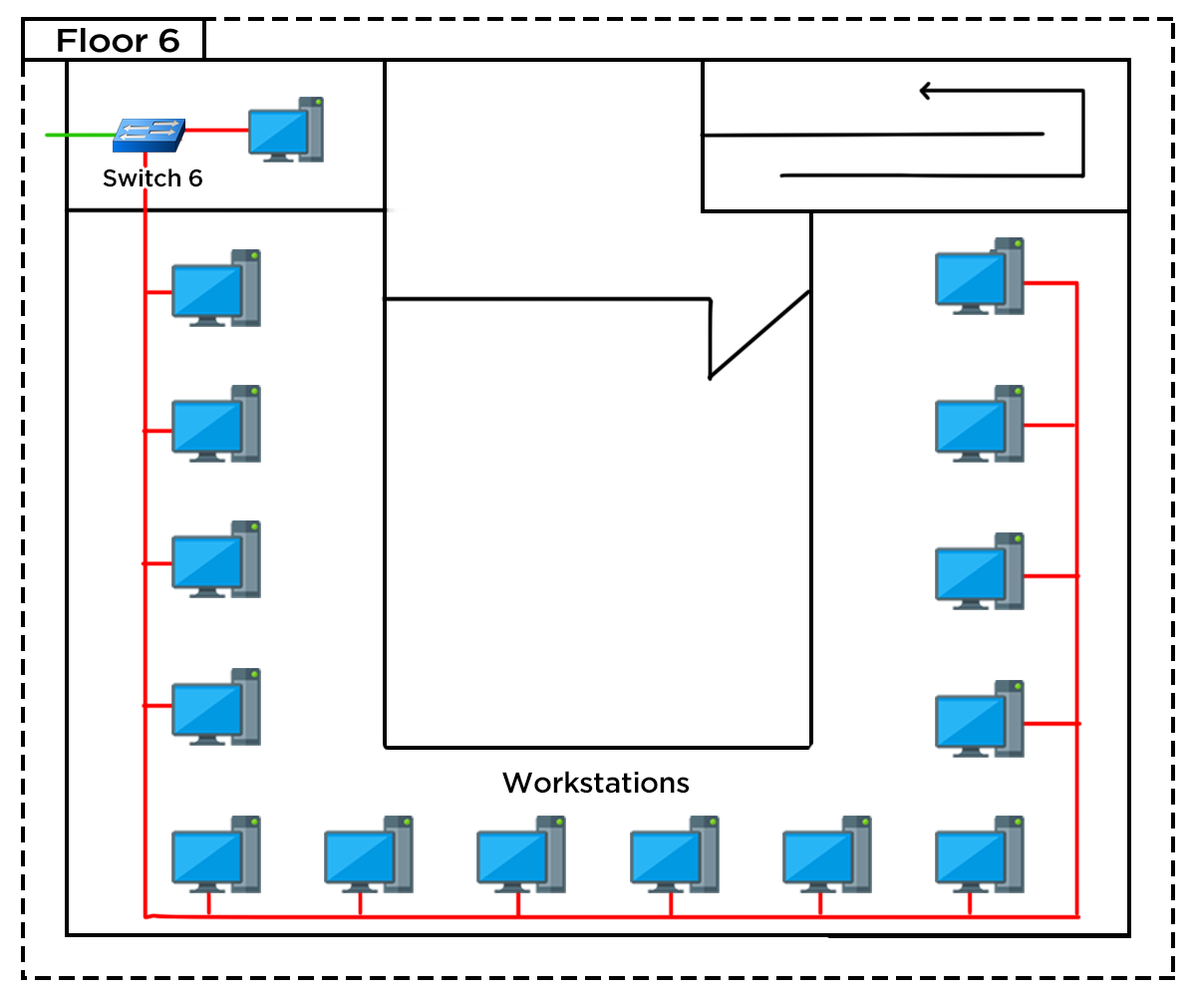
<style>
.page{position:relative;width:1196px;height:997px;background:#ffffff}
.page>*{position:absolute;margin:0}
.t1{font:32.8px "iCielGotham-Medium";letter-spacing:-0.02em;color:#000000;scale:1.1 1}
.t2{font:24.2px "iCielGotham-Medium";letter-spacing:-0.02em;color:#000000}
.t3{font:28.9px "iCielGotham-Medium";letter-spacing:-0.02em;color:#000000}
</style>
<div class="page">
<p class="t1" style="left:58px;top:28px;width:121px;height:25px">Floor 6</p>
<p class="t2" style="left:103px;top:168px;width:99px;height:19px">Switch 6</p>
<p class="t3" style="left:502px;top:771px;width:188px;height:22px">Workstations</p>
</div>
